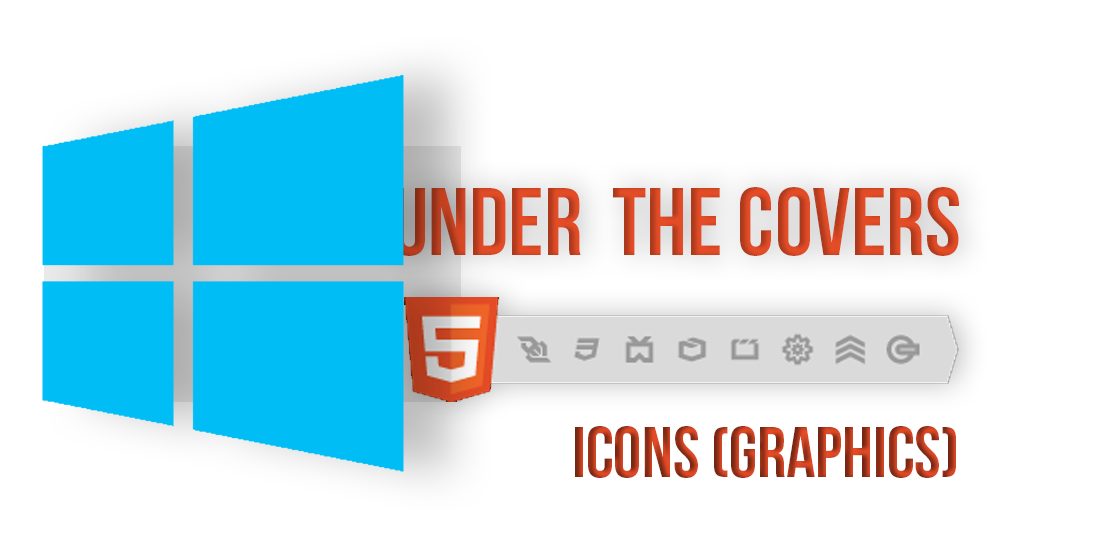
<style>
.page{position:relative;width:1116px;height:540px;background:#ffffff}
.page>*{position:absolute;margin:0}
.t1{font:96px "BebasNeue"}
.t2{font:72px "BebasNeue"}
</style>
<div class="page">
<p class="t1" style="left:393px;top:187px;width:566px;height:69px">UNDER  THE COVERS</p>
<p class="t2" style="left:575px;top:426px;width:381px;height:52px">ICONs (Graphics)</p>
</div>
